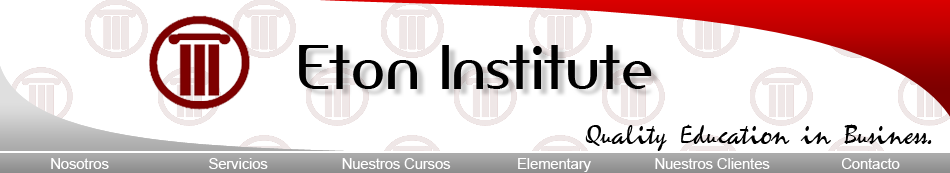
<style>
.page{position:relative;width:950px;height:173px;background:#ffffff}
.page>*{position:absolute;margin:0}
.t1{font:58.3px "AmerikaSans";color:#000000}
.t2{font:25px "Mariah";color:#000000}
.t3{font:14.6px "ArialMT";color:#ffffff}
</style>
<div class="page">
<p class="t1" style="left:299px;top:45px;width:353px;height:44px">Eton Institute</p>
<p class="t2" style="left:585px;top:124px;width:347px;height:27px">Quality Education in Business.</p>
<p class="t3" style="left:51px;top:158px;width:58px;height:11px">Nosotros</p>
<p class="t3" style="left:209px;top:158px;width:59px;height:11px">Servicios</p>
<p class="t3" style="left:342px;top:158px;width:109px;height:11px">Nuestros Cursos</p>
<p class="t3" style="left:518px;top:158px;width:73px;height:14px">Elementary</p>
<p class="t3" style="left:655px;top:158px;width:115px;height:11px">Nuestros Clientes</p>
<p class="t3" style="left:842px;top:158px;width:58px;height:11px">Contacto</p>
</div>
